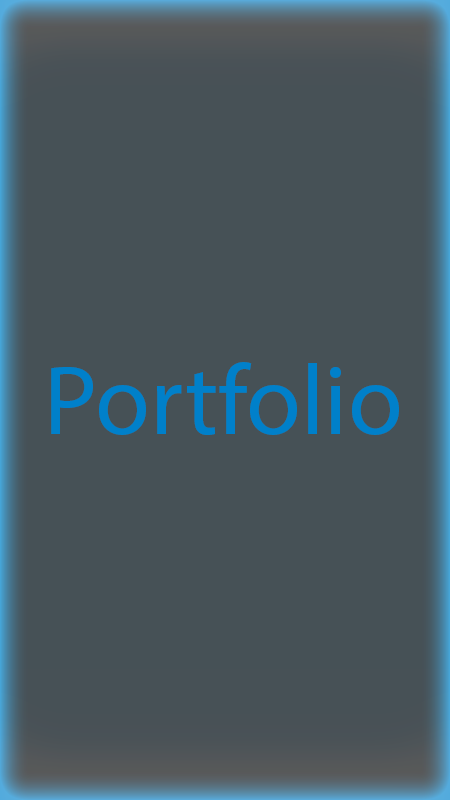
<style>
.page{position:relative;width:450px;height:800px;background:#465156}
.page>*{position:absolute;margin:0}
.t1{font:100px "MyriadPro-Regular";color:#0080ca}
</style>
<div class="page">
<p class="t1" style="left:51px;top:362px;width:348px;height:73px">Portfolio</p>
</div>
